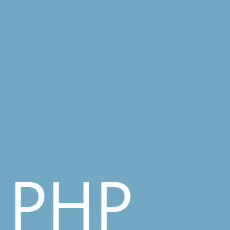
<style>
.page{position:relative;width:230px;height:230px;background:#72a8c3}
.page>*{position:absolute;margin:0}
.t1{font:67.7px "Leelawadee";color:#ffffff}
</style>
<div class="page">
<p class="t1" style="left:15px;top:182px;width:116px;height:48px">PHP</p>
</div>
